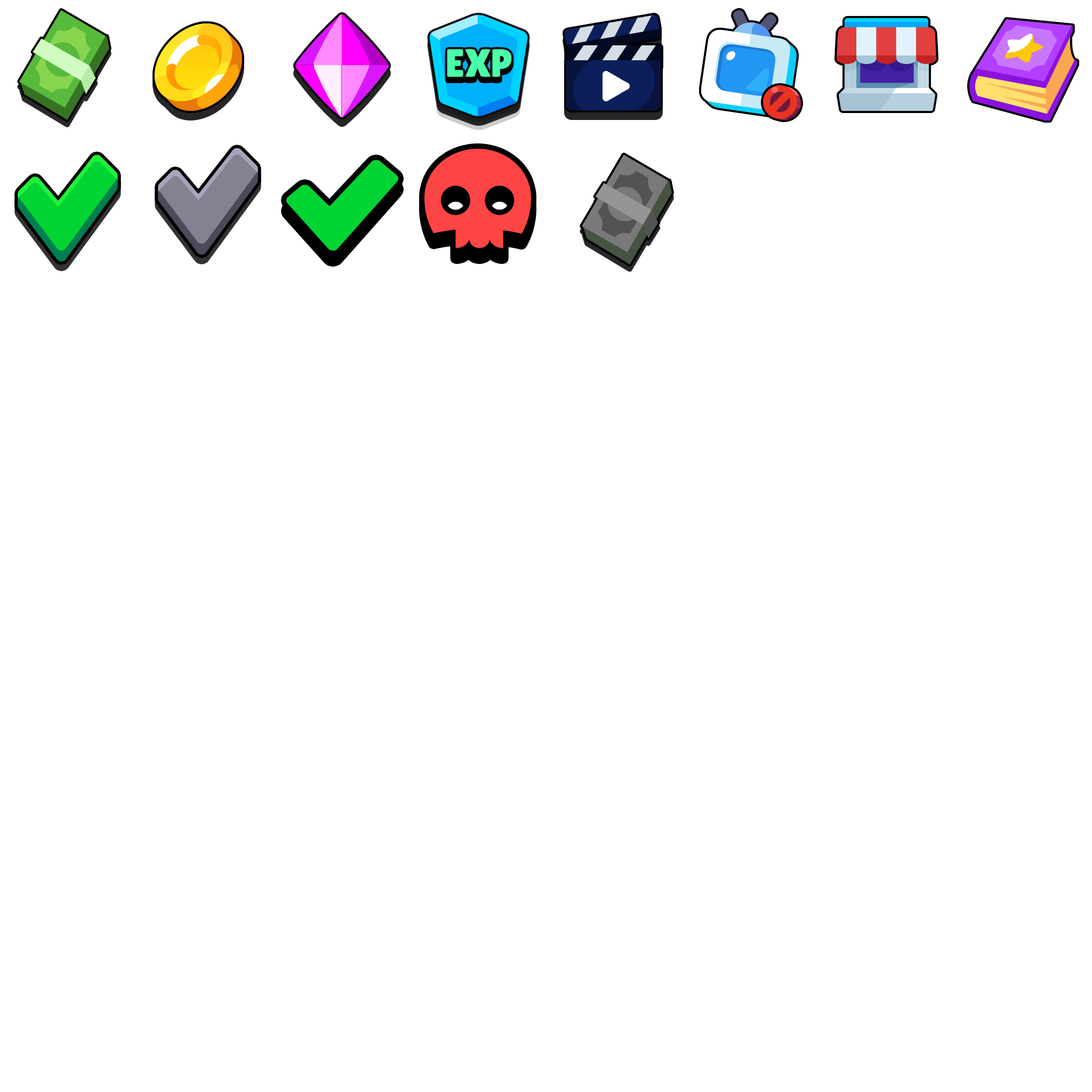
<style>
.page{position:relative;width:1092px;height:1092px;background:#ffffff}
.page>*{position:absolute;margin:0}
.t1{font:39.4px "LilitaOne";color:#4bffa8;text-transform:uppercase}
</style>
<div class="page">
<p class="t1" style="left:447px;top:49px;width:65px;height:28px">Exp</p>
</div>
